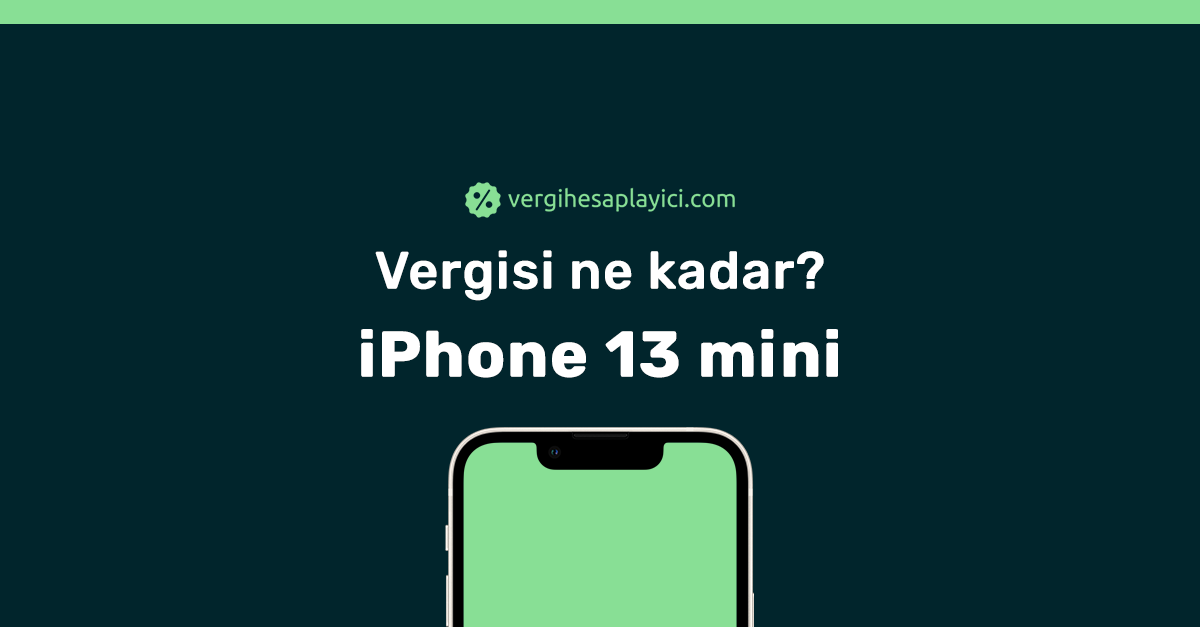
<style>
.page{position:relative;width:1200px;height:627px;background:#01252c}
.page>*{position:absolute;margin:0}
.t1{font:52px/88px "Rubik-Medium";color:#ffffff;font-weight:bold}
.t2{font:64px/88px "Rubik-Bold";color:#ffffff;font-weight:bold}
</style>
<div class="page">
<p class="t1" style="left:361px;top:250px;width:477px;height:128px;text-align:center">Vergisi ne kadar?<br><span class="t2">iPhone 13 mini</span></p>
</div>
